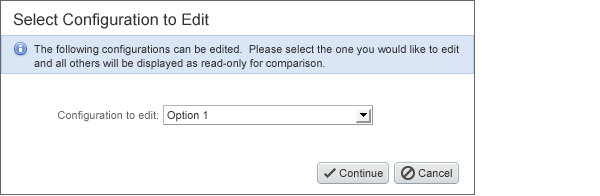
<style>
.page{position:relative;width:600px;height:196px;background:#ffffff}
.page>*{position:absolute;margin:0}
.t1{font:16px "ArialMT";letter-spacing:0.005em;color:#333333}
.t2{font:11px/20px "ArialMT";color:#333333}
.t3{font:11px/14px "ArialMT";color:#333333}
.t4{font:11px "ArialMT";color:#666666}
.t5{font:11px "ArialMT";color:#333333}
.t6{font:11px "ArialMT";color:#303030}
</style>
<div class="page">
<p class="t1" style="left:13px;top:13px;width:196px;height:16px">Select Configuration to Edit</p>
<p class="t2" style="left:34px;top:45px;width:425px;height:25px">The following configurations can be edited.  Please select the one you would like to edit <br><span class="t3">and all others will be displayed as read-only for comparison.</span></p>
<p class="t4" style="left:58px;top:111px;width:100px;height:11px">Configuration to edit:</p>
<p class="t5" style="left:167px;top:111px;width:40px;height:11px">Option 1</p>
<p class="t6" style="left:339px;top:169px;width:44px;height:8px">Continue</p>
<p class="t6" style="left:418px;top:169px;width:34px;height:8px">Cancel</p>
</div>
